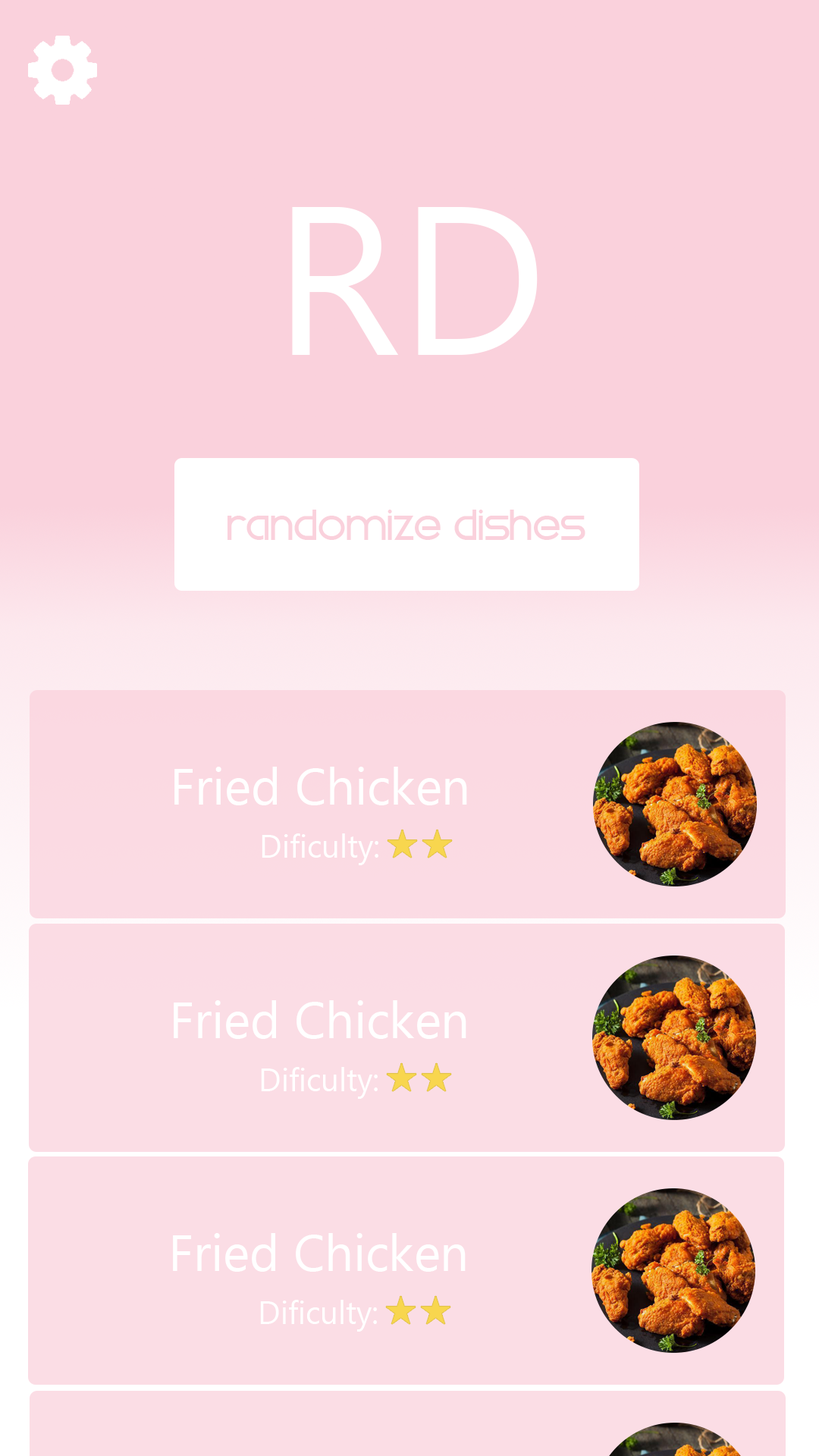
<style>
.page{position:relative;width:819px;height:1456px;background:#fad1dc}
.page>*{position:absolute;margin:0}
.t1{font:210.6px "MicrosoftNewTaiLue";color:#ffffff}
.t2{font:37.9px "Swatchit";color:#fad1dc}
.t3{font:50.6px "MicrosoftNewTaiLue";color:#ffffff}
.t4{font:31.6px "MicrosoftNewTaiLue";color:#ffffff}
</style>
<div class="page">
<p class="t1" style="left:292px;top:207px;width:246px;height:148px">RD</p>
<p class="t2" style="left:227px;top:510px;width:358px;height:30px">Randomize Dishes</p>
<p class="t3" style="left:174px;top:767px;width:293px;height:38px">Fried Chicken</p>
<p class="t4" style="left:262px;top:833px;width:116px;height:32px">Dificulty:</p>
<p class="t3" style="left:174px;top:1000px;width:292px;height:39px">Fried Chicken</p>
<p class="t4" style="left:261px;top:1067px;width:117px;height:32px">Dificulty:</p>
<p class="t3" style="left:173px;top:1233px;width:293px;height:39px">Fried Chicken</p>
<p class="t4" style="left:260px;top:1300px;width:117px;height:32px">Dificulty:</p>
</div>
